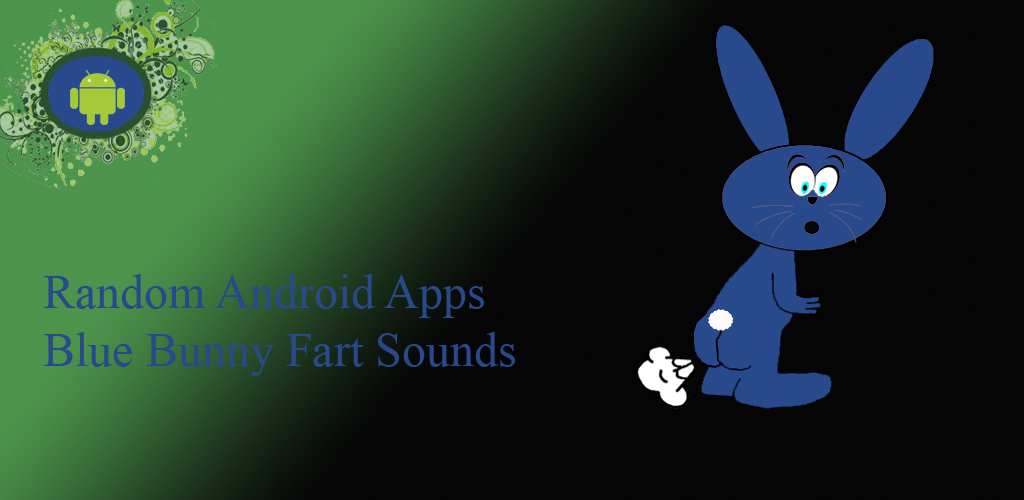
<style>
.page{position:relative;width:1024px;height:500px;background:#050505}
.page>*{position:absolute;margin:0}
.t1{font:48px "TimesNewRomanPSMT";color:#28498c}
</style>
<div class="page">
<p class="t1" style="left:43px;top:274px;width:472px;height:102px">Random Android Apps<br>Blue Bunny Fart Sounds</p>
</div>
